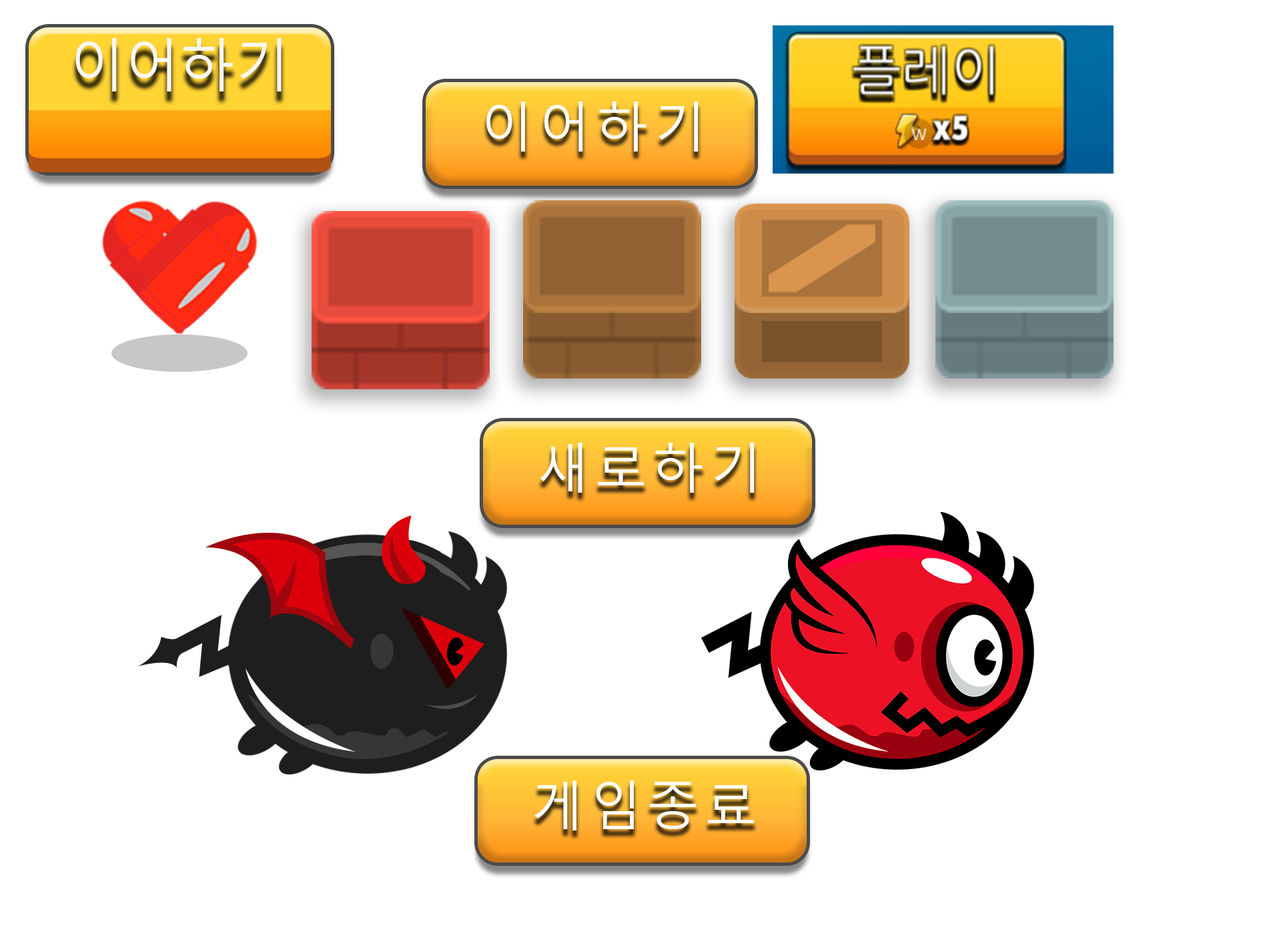
<style>
.page{position:relative;width:1261px;height:946px;background:#ffffff}
.page>*{position:absolute;margin:0}
.t1{font:57px "MalgunGothic";color:#f7f7f7}
.t2{font:53.7px "MalgunGothic";letter-spacing:0.1em;color:#ffffff}
</style>
<div class="page">
<p class="t1" style="left:75px;top:38px;width:207px;height:53px">이어하기</p>
<p class="t2" style="left:486px;top:101px;width:213px;height:50px">이어하기</p>
<p class="t2" style="left:540px;top:442px;width:215px;height:50px">새로하기</p>
<p class="t2" style="left:534px;top:780px;width:220px;height:50px">게임종료</p>
</div>
